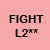
<style>
.page{position:relative;width:50px;height:50px;background:#f9a8a8}
.page>*{position:absolute;margin:0}
.t1{font:11.1px "ArialRoundedMTBold";color:#000000}
</style>
<div class="page">
<p class="t1" style="left:9px;top:15px;width:35px;height:8px">FIGHT</p>
<p class="t1" style="left:15px;top:29px;width:23px;height:8px">L2**</p>
</div>
